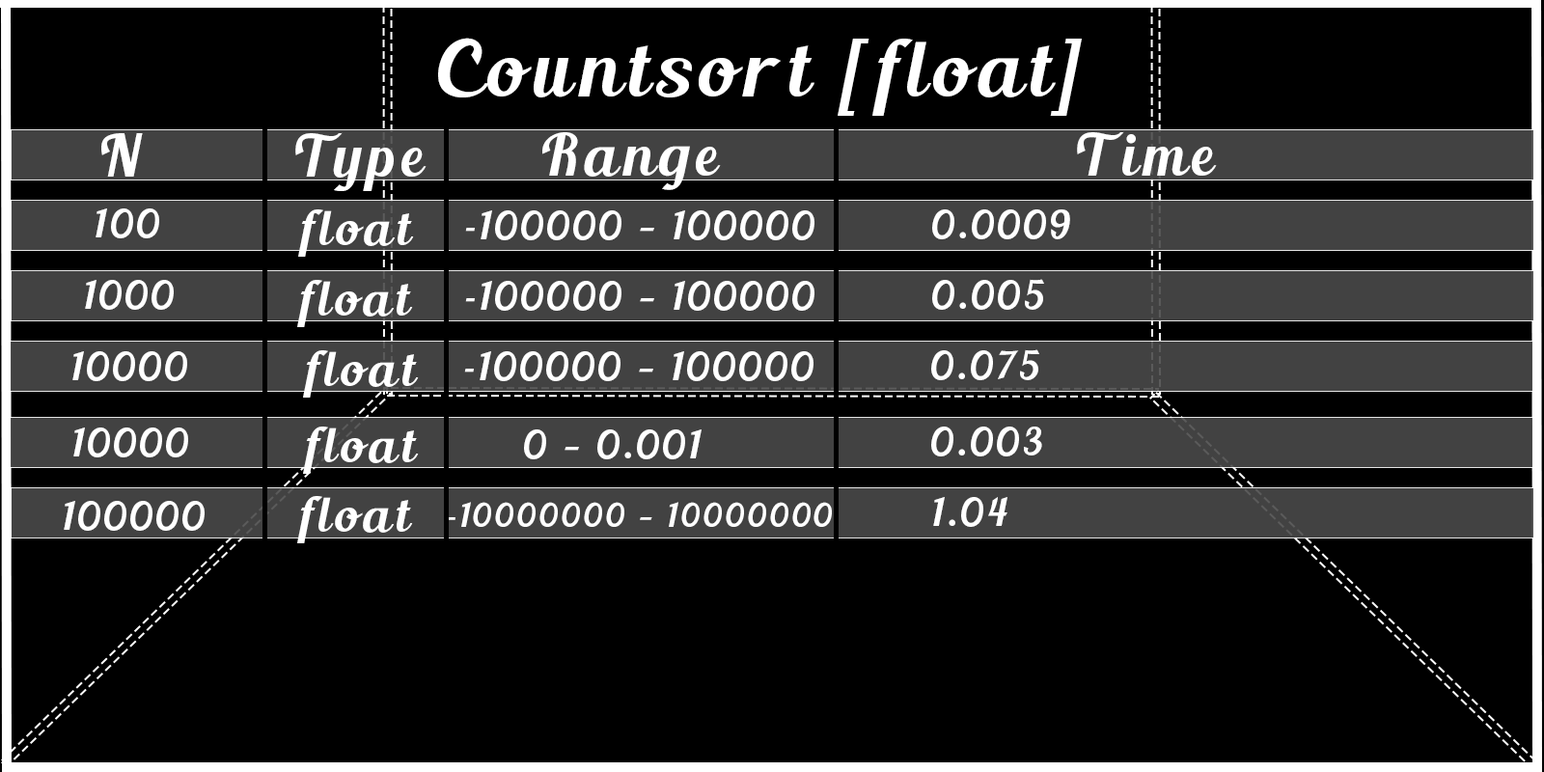
<style>
.page{position:relative;width:1544px;height:772px;background:#000000}
.page>*{position:absolute;margin:0}
.t1{font:77.2px "BlendaScript";letter-spacing:0.1em;color:#ffffff}
.t2{font:57.9px "BlendaScript";letter-spacing:0.1em;color:#ffffff}
.t3{font:38.6px "BlendaScript";letter-spacing:0.1em;color:#ffffff}
.t4{font:48.3px "BlendaScript";letter-spacing:0.1em;color:#ffffff}
.t5{font:32.8px "BlendaScript";letter-spacing:0.1em;color:#ffffff}
</style>
<div class="page">
<p class="t1" style="left:438px;top:38px;width:644px;height:78px">Countsort [float]</p>
<p class="t2" style="left:101px;top:133px;width:42px;height:44px">N</p>
<p class="t2" style="left:295px;top:132px;width:132px;height:59px">Type</p>
<p class="t2" style="left:542px;top:132px;width:179px;height:58px">Range</p>
<p class="t2" style="left:1077px;top:131px;width:140px;height:45px">Time</p>
<p class="t3" style="left:96px;top:208px;width:63px;height:30px">100</p>
<p class="t4" style="left:298px;top:209px;width:116px;height:48px">float</p>
<p class="t3" style="left:932px;top:209px;width:138px;height:30px">0.0009</p>
<p class="t3" style="left:465px;top:210px;width:350px;height:30px">-100000 — 100000</p>
<p class="t3" style="left:85px;top:280px;width:89px;height:30px">1000</p>
<p class="t4" style="left:297px;top:280px;width:116px;height:47px">float</p>
<p class="t3" style="left:465px;top:281px;width:350px;height:30px">-100000 — 100000</p>
<p class="t3" style="left:932px;top:279px;width:112px;height:31px">0.005</p>
<p class="t3" style="left:72px;top:351px;width:115px;height:30px">10000</p>
<p class="t4" style="left:303px;top:350px;width:116px;height:48px">float</p>
<p class="t3" style="left:464px;top:351px;width:350px;height:30px">-100000 — 100000</p>
<p class="t3" style="left:931px;top:349px;width:109px;height:31px">0.075</p>
<p class="t3" style="left:73px;top:428px;width:115px;height:29px">10000</p>
<p class="t4" style="left:303px;top:427px;width:116px;height:47px">float</p>
<p class="t3" style="left:524px;top:430px;width:178px;height:29px">0 — 0.001</p>
<p class="t3" style="left:931px;top:427px;width:111px;height:30px">0.003</p>
<p class="t4" style="left:297px;top:496px;width:116px;height:47px">float</p>
<p class="t3" style="left:933px;top:497px;width:75px;height:30px">1.04</p>
<p class="t3" style="left:64px;top:501px;width:141px;height:30px">100000</p>
<p class="t5" style="left:448px;top:502px;width:384px;height:25px">-10000000 — 10000000</p>
</div>
